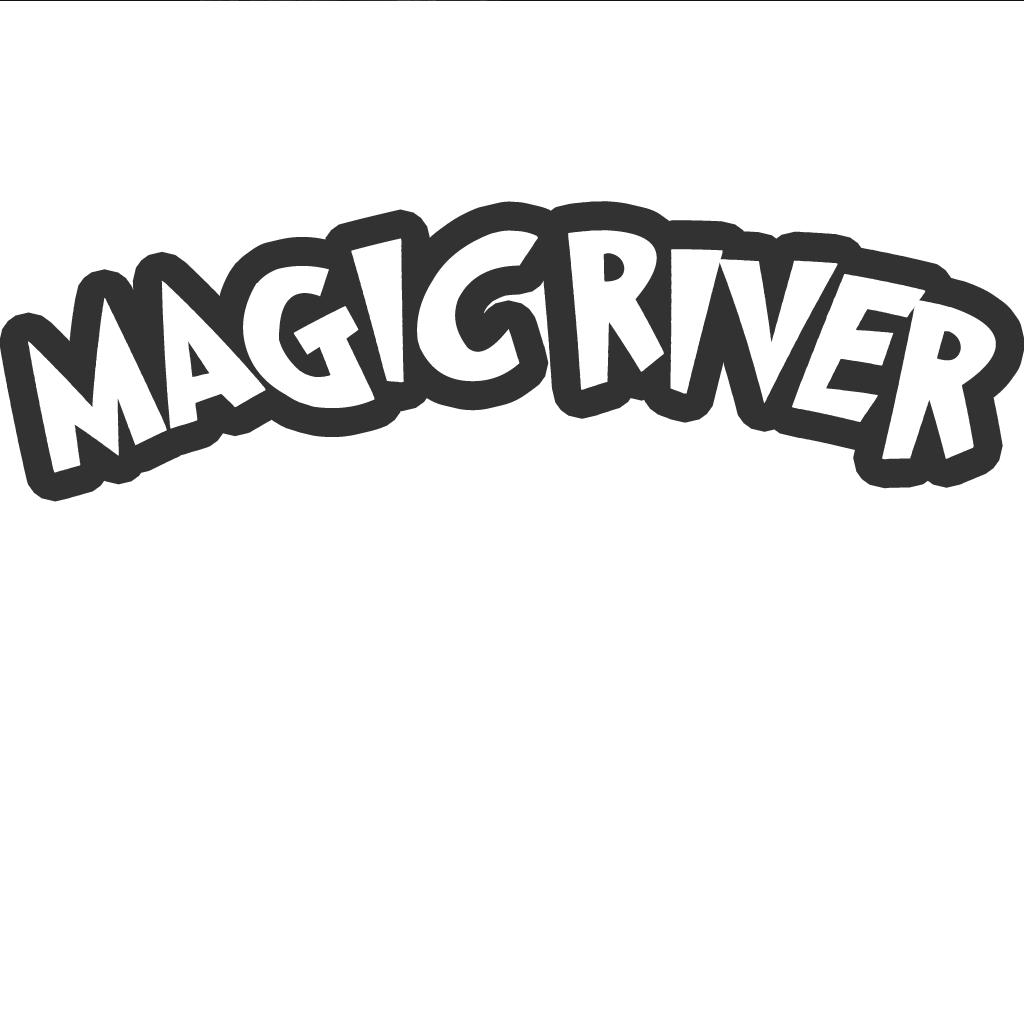
<style>
.page{position:relative;width:1024px;height:1024px;background:#ffffff}
.page>*{position:absolute;margin:0}
.t1{font:180px "NewUnicodeFont";color:#ffffff}
</style>
<div class="page">
<p class="t1" style="left:28px;top:229px;width:968px;height:243px">MAGIC RIVER</p>
</div>
